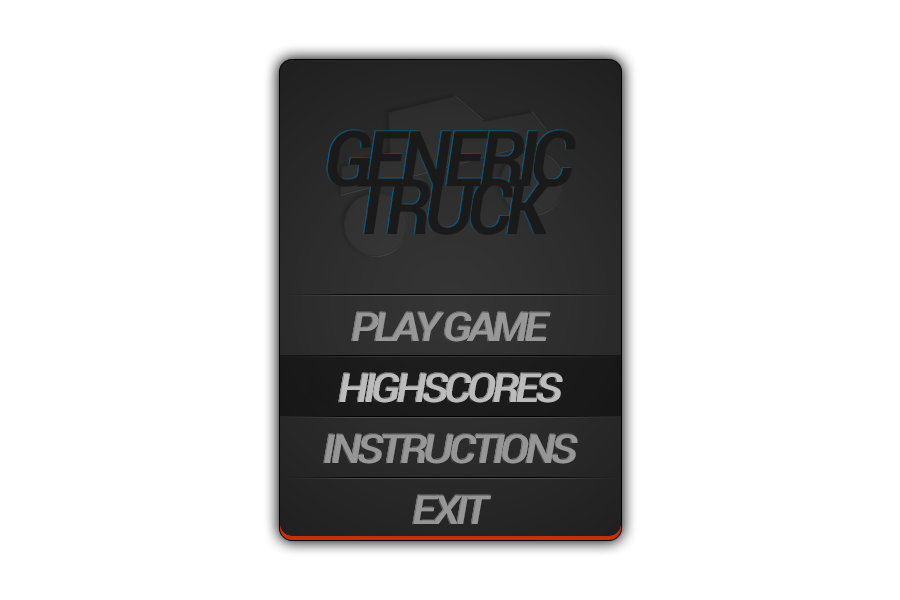
<style>
.page{position:relative;width:900px;height:600px;background:#ffffff}
.page>*{position:absolute;margin:0}
.t1{font:96.1px/47.7px "Roboto-CondensedItalic";letter-spacing:-0.1em;color:#1a1a1a;font-variant:small-caps}
.t2{font:50.1px "Roboto-CondensedItalic";letter-spacing:-0.1em;color:#989898;font-variant:small-caps;scale:1.16 1}
.t3{font:50.1px "Roboto-CondensedItalic";letter-spacing:-0.1em;color:#bcbcbc;font-variant:small-caps;scale:1.16 1}
.t4{font:50.1px "Roboto-CondensedItalic";letter-spacing:-0.1em;color:#969696;font-variant:small-caps;scale:1.16 1}
</style>
<div class="page">
<p class="t1" style="left:327px;top:130px;width:249px;height:105px;text-align:center">GENERIC<br>TRUCK</p>
<p class="t2" style="left:352px;top:312px;width:199px;height:30px">play game</p>
<p class="t3" style="left:339px;top:373px;width:224px;height:30px">HIGHSCORES</p>
<p class="t4" style="left:324px;top:434px;width:254px;height:30px">INSTRUCTIONS</p>
<p class="t4" style="left:413px;top:495px;width:79px;height:29px">EXIT</p>
</div>
